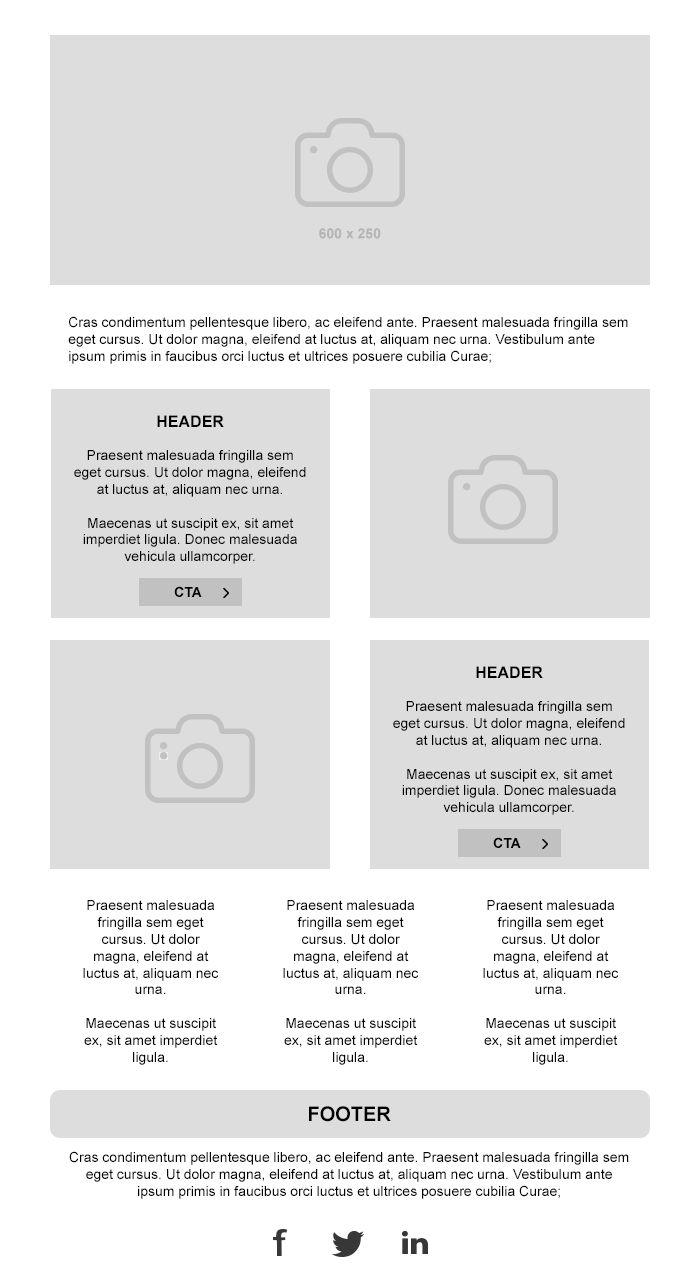
<style>
.page{position:relative;width:700px;height:1278px;background:#ffffff}
.page>*{position:absolute;margin:0}
.t1{font:14px "Arial-BoldMT";color:#b3b3b3}
.t2{font:14px "ArialMT";color:#000000}
.t3{font:16px "Arial-BoldMT";color:#000000}
.t4{font:14px "Arial-BoldMT";color:#000000}
.t5{font:20px "Arial-BoldMT";color:#000000}
</style>
<div class="page">
<p class="t1" style="left:319px;top:228px;width:62px;height:11px">600 x 250</p>
<p class="t2" style="left:68px;top:316px;width:560px;height:48px">Cras condimentum pellentesque libero, ac eleifend ante. Praesent malesuada fringilla sem eget cursus. Ut dolor magna, eleifend at luctus at, aliquam nec urna. Vestibulum ante ipsum primis in faucibus orci luctus et ultrices posuere cubilia Curae;</p>
<p class="t2" style="left:74px;top:415px;width:232px;height:149px;text-align:center"><span class="t3">HEADER<br></span><br>Praesent malesuada fringilla sem eget cursus. Ut dolor magna, eleifend at luctus at, aliquam nec urna.<br><br>Maecenas ut suscipit ex, sit amet imperdiet ligula. Donec malesuada vehicula ullamcorper.</p>
<p class="t4" style="left:174px;top:586px;width:28px;height:11px">CTA</p>
<p class="t2" style="left:393px;top:666px;width:232px;height:149px;text-align:center"><span class="t3">HEADER<br></span><br>Praesent malesuada fringilla sem eget cursus. Ut dolor magna, eleifend at luctus at, aliquam nec urna.<br><br>Maecenas ut suscipit ex, sit amet imperdiet ligula. Donec malesuada vehicula ullamcorper.</p>
<p class="t4" style="left:493px;top:837px;width:28px;height:11px">CTA</p>
<p class="t2" style="left:83px;top:900px;width:136px;height:165px;text-align:center"><span class="t3"><br></span><br>Praesent malesuada fringilla sem eget cursus. Ut dolor magna, eleifend at luctus at, aliquam nec urna.<br><br>Maecenas ut suscipit ex, sit amet imperdiet ligula.</p>
<p class="t2" style="left:283px;top:900px;width:136px;height:165px;text-align:center"><span class="t3"><br></span><br>Praesent malesuada fringilla sem eget cursus. Ut dolor magna, eleifend at luctus at, aliquam nec urna.<br><br>Maecenas ut suscipit ex, sit amet imperdiet ligula.</p>
<p class="t2" style="left:483px;top:900px;width:136px;height:165px;text-align:center"><span class="t3"><br></span><br>Praesent malesuada fringilla sem eget cursus. Ut dolor magna, eleifend at luctus at, aliquam nec urna.<br><br>Maecenas ut suscipit ex, sit amet imperdiet ligula.</p>
<p class="t2" style="left:69px;top:1106px;width:560px;height:93px;text-align:center"><span class="t5">FOOTER<br><br></span>Cras condimentum pellentesque libero, ac eleifend ante. Praesent malesuada fringilla sem eget cursus. Ut dolor magna, eleifend at luctus at, aliquam nec urna. Vestibulum ante ipsum primis in faucibus orci luctus et ultrices posuere cubilia Curae;</p>
</div>
